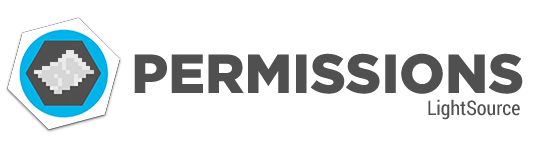
<style>
.page{position:relative;width:540px;height:150px;background:#ffffff}
.page>*{position:absolute;margin:0}
.t1{font:55px "GothamPro-Black";color:#505050}
.t2{font:20px "RobotoCondensed-Regular";color:#505050}
</style>
<div class="page">
<p class="t1" style="left:134px;top:53px;width:389px;height:41px">PERMISSIONS</p>
<p class="t2" style="left:428px;top:99px;width:92px;height:21px">LightSource</p>
</div>
